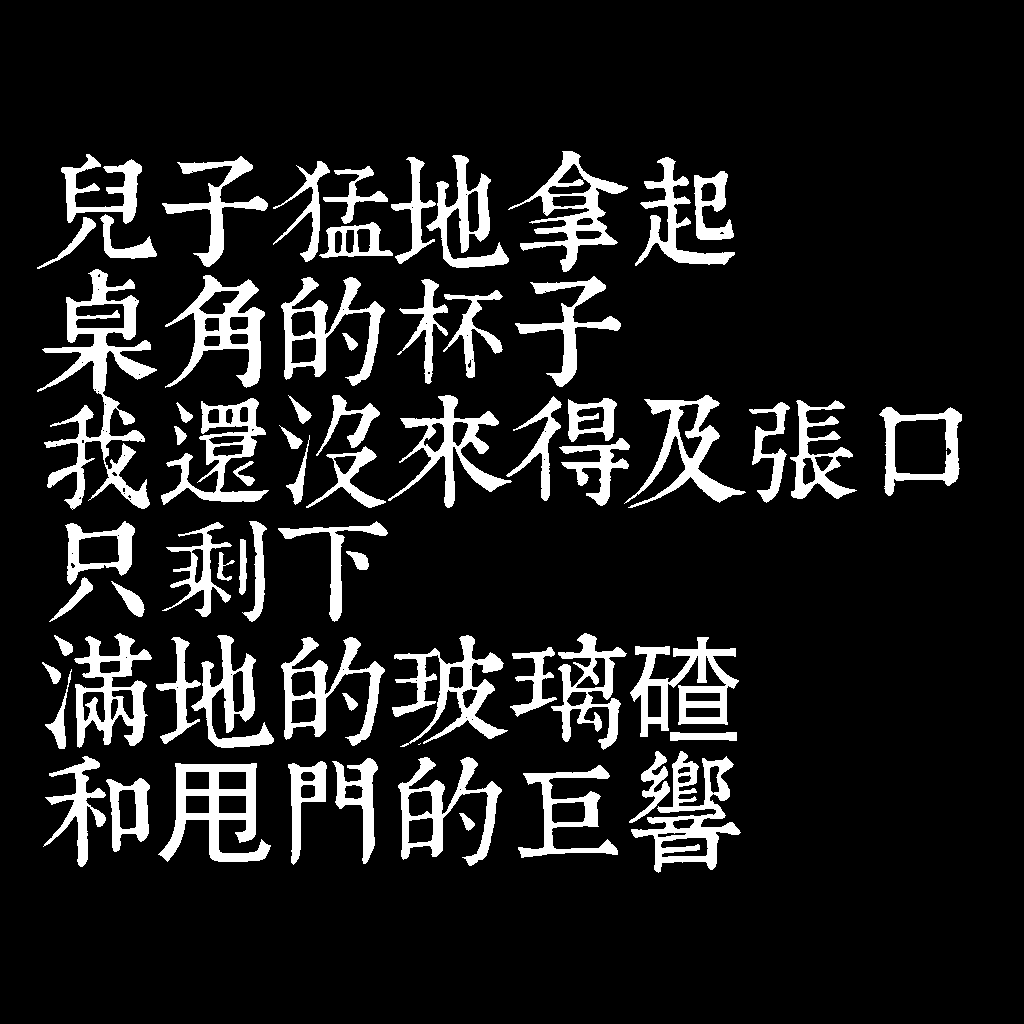
<style>
.page{position:relative;width:1024px;height:1024px;background:#000000}
.page>*{position:absolute;margin:0}
.t1{font:120px/120px "TpldKhangXiDictTrial";letter-spacing:-0.02em;color:#ffffff}
.t2{font:120px/120px "AdobeHeitiStd-Regular";letter-spacing:-0.02em;color:#ffffff}
</style>
<div class="page">
<p class="t1" style="left:37px;top:151px;width:925px;height:722px">兒子猛地拿起<br>桌角的杯子<br>我還沒來得及張口<br>只剩下<br>滿地的玻璃<span class="t2">碴<br></span>和<span class="t2">甩</span>門的巨響</p>
</div>
